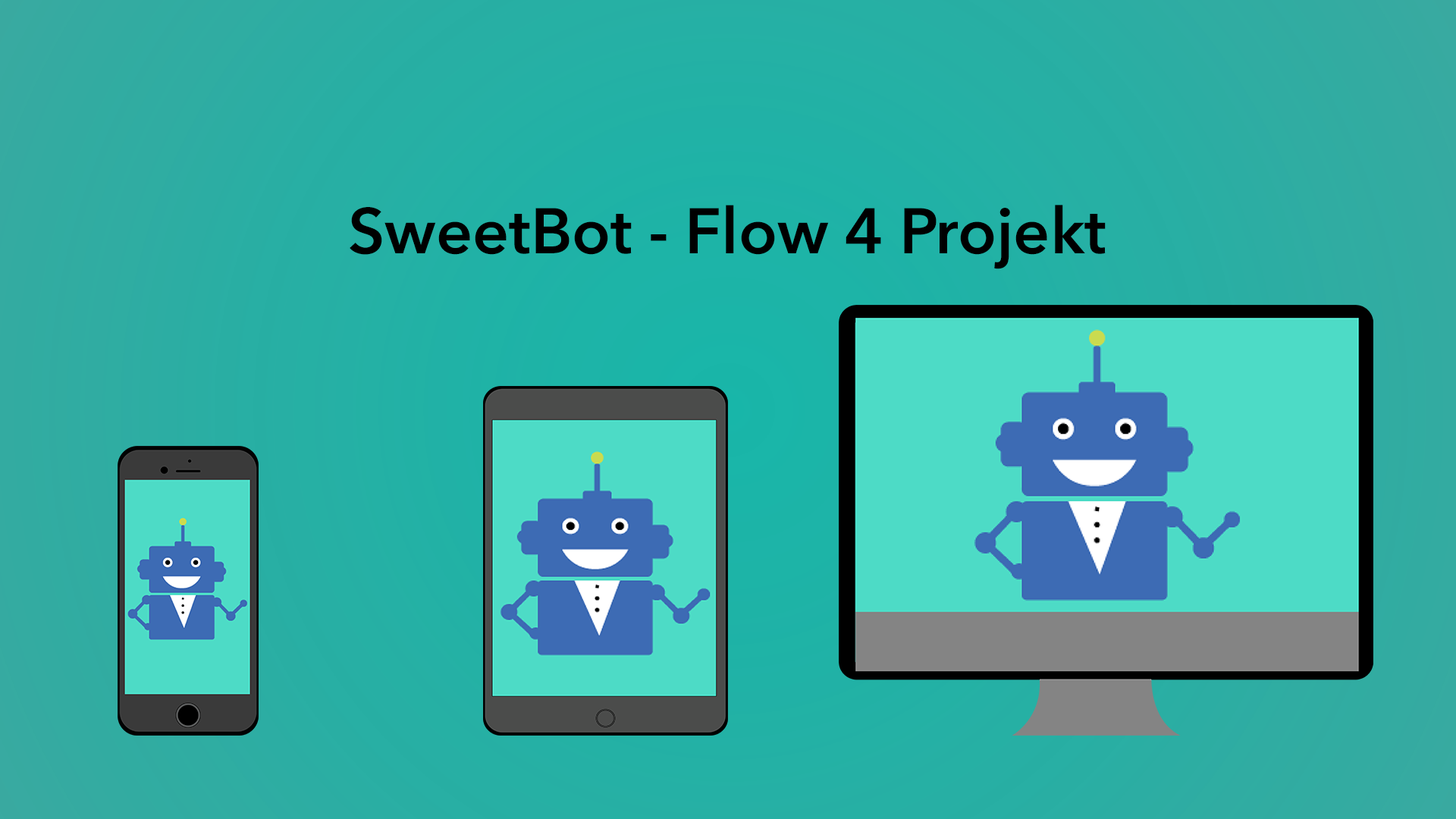
<style>
.page{position:relative;width:1456px;height:819px}
.page>*{position:absolute;margin:0}
.t1{font:63.8px "AvenirNext-DemiBold";color:#000000}
</style>
<div class="page">
<p class="t1" style="left:350px;top:205px;width:756px;height:64px">SweetBot - Flow 4 Projekt</p>
</div>
